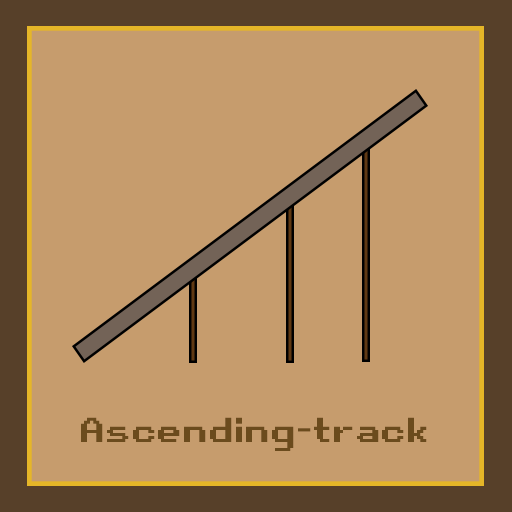
<style>
.page{position:relative;width:512px;height:512px;background:#c69c6d}
.page>*{position:absolute;margin:0}
.t1{font:33.3px "RetroGaming";color:#6b4b1d}
</style>
<div class="page">
<p class="t1" style="left:81px;top:417px;width:346px;height:34px">Ascending-track</p>
</div>
